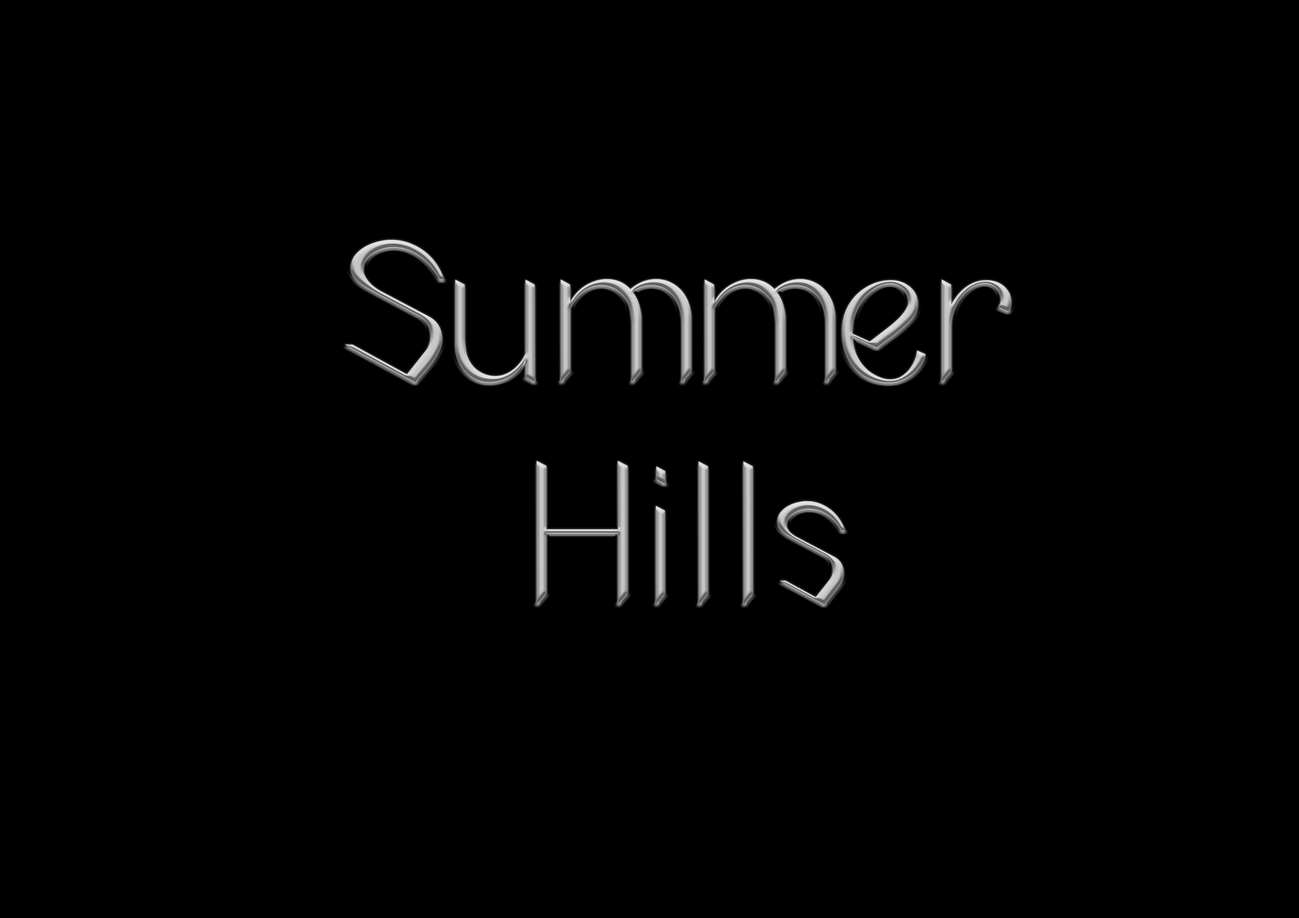
<style>
.page{position:relative;width:1299px;height:918px;background:#000000}
.page>*{position:absolute;margin:0}
.t1{font:185.1px "aespa-Regular"}
</style>
<div class="page">
<p class="t1" style="left:345px;top:240px;width:666px;height:365px;text-align:center">Summer<br>Hills</p>
</div>
